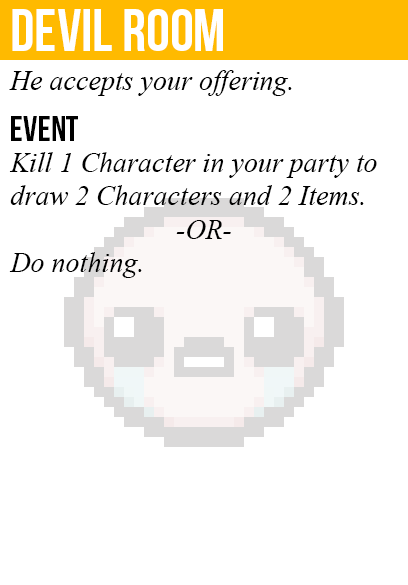
<style>
.page{position:relative;width:408px;height:585px;background:#ffffff}
.page>*{position:absolute;margin:0}
.t1{font:60px "BebasNeue";color:#ffffff}
.t2{font:28px "TimesNewRomanPS-ItalicMT";color:#000000}
.t3{font:36px "BebasNeue";color:#000000}
</style>
<div class="page">
<p class="t1" style="left:12px;top:9px;width:211px;height:42px">devil room</p>
<p class="t2" style="left:9px;top:70px;width:283px;height:26px">He accepts your offering.</p>
<p class="t3" style="left:11px;top:116px;width:67px;height:25px">event</p>
<p class="t2" style="left:9px;top:152px;width:368px;height:126px">Kill 1 Character in your party to<br>draw 2 Characters and 2 Items.<br><br>Do nothing.</p>
<p class="t2" style="left:176px;top:220px;width:55px;height:19px">-OR-</p>
</div>
